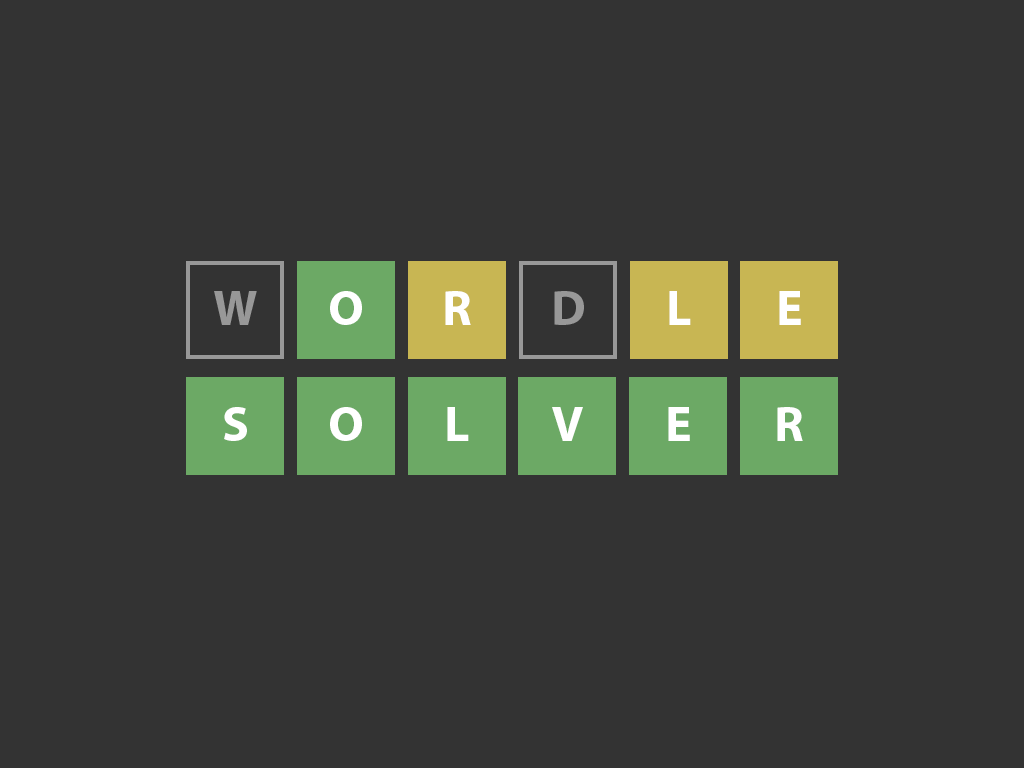
<style>
.page{position:relative;width:1024px;height:768px;background:#333333}
.page>*{position:absolute;margin:0}
.t1{font:49.8px "MyriadPro-Bold";color:#989898}
.t2{font:49.8px "MyriadPro-Bold";color:#ffffff}
.t3{font:49.7px "MyriadPro-Bold";color:#ffffff}
</style>
<div class="page">
<p class="t1" style="left:214px;top:291px;width:43px;height:34px">W</p>
<p class="t2" style="left:330px;top:291px;width:32px;height:34px">O</p>
<p class="t2" style="left:445px;top:291px;width:26px;height:34px">R</p>
<p class="t1" style="left:554px;top:291px;width:30px;height:34px">D</p>
<p class="t2" style="left:669px;top:291px;width:22px;height:34px">L</p>
<p class="t2" style="left:779px;top:291px;width:22px;height:34px">E</p>
<p class="t3" style="left:224px;top:407px;width:23px;height:34px">S</p>
<p class="t3" style="left:330px;top:407px;width:32px;height:34px">O</p>
<p class="t3" style="left:447px;top:407px;width:22px;height:34px">L</p>
<p class="t3" style="left:552px;top:407px;width:31px;height:34px">V</p>
<p class="t3" style="left:668px;top:407px;width:22px;height:34px">E</p>
<p class="t3" style="left:777px;top:407px;width:26px;height:34px">R</p>
</div>
